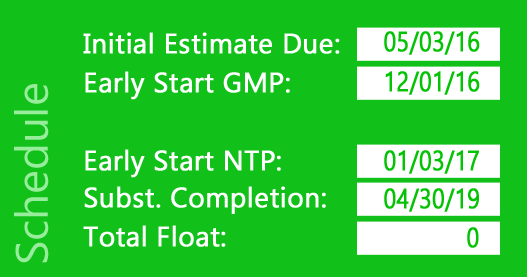
<style>
.page{position:relative;width:527px;height:277px;background:#11c019}
.page>*{position:absolute;margin:0}
.t1{font:27.8px "Gadugi";color:#ffffff;font-weight:bold}
.t2{font:27.8px "Gadugi";color:#04c204;font-weight:bold;scale:0.82 1}
.t3{font:45.6px "Gadugi";color:#98ed9c}
</style>
<div class="page">
<p class="t1" style="left:83px;top:32px;width:257px;height:22px">Initial Estimate Due:</p>
<p class="t2" style="left:384px;top:31px;width:96px;height:24px">05/03/16</p>
<p class="t1" style="left:85px;top:71px;width:205px;height:29px">Early Start GMP:</p>
<p class="t2" style="left:385px;top:71px;width:95px;height:24px">12/01/16</p>
<p class="t3" style="left:14px;top:84px;width:35px;height:179px;rotate:-90deg">Schedule</p>
<p class="t1" style="left:85px;top:149px;width:196px;height:29px">Early Start NTP:</p>
<p class="t2" style="left:384px;top:150px;width:95px;height:24px">01/03/17</p>
<p class="t1" style="left:84px;top:186px;width:242px;height:28px">Subst. Completion:</p>
<p class="t2" style="left:384px;top:188px;width:95px;height:24px">04/30/19</p>
<p class="t1" style="left:83px;top:225px;width:143px;height:22px">Total Float:</p>
<p class="t2" style="left:467px;top:227px;width:12px;height:21px">0</p>
</div>
